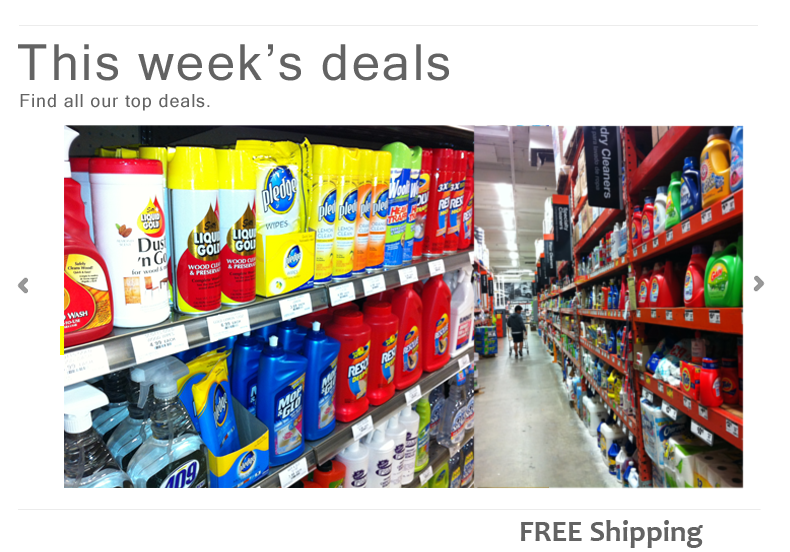
<style>
.page{position:relative;width:790px;height:552px;background:#ffffff}
.page>*{position:absolute;margin:0}
.t1{font:50px "MicrosoftSansSerif";letter-spacing:0.05em;color:#636363}
.t2{font:18px "MicrosoftSansSerif";letter-spacing:0.05em;color:#636363}
.t3{font:30px "Candara-Bold";color:#636363}
</style>
<div class="page">
<p class="t1" style="left:18px;top:44px;width:431px;height:37px">This week’s deals</p>
<p class="t2" style="left:20px;top:94px;width:190px;height:17px">Find all our top deals.</p>
<p class="t3" style="left:521px;top:520px;width:182px;height:28px">FREE Shipping</p>
</div>
